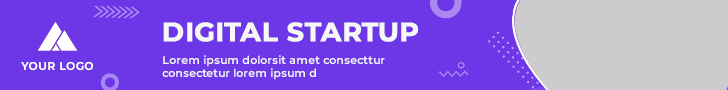
<style>
.page{position:relative;width:728px;height:90px;background:#6d37e7}
.page>*{position:absolute;margin:0}
.t1{font:26.6px "Montserrat-Bold";color:#f7f7f7;font-weight:bold}
.t2{font:11.2px "Montserrat-Bold";letter-spacing:0.025em;color:#ffffff}
.t3{font:11px "Montserrat-SemiBold";color:#f7f7f7}
</style>
<div class="page">
<p class="t1" style="left:163px;top:22px;width:255px;height:20px">DIGITAL STARTUP</p>
<p class="t2" style="left:21px;top:61px;width:72px;height:10px">YOUR LOGO</p>
<p class="t3" style="left:162px;top:55px;width:223px;height:25px">Lorem ipsum dolorsit amet consecttur <br>consectetur lorem ipsum d</p>
</div>
